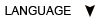
<style>
.page{position:relative;width:100px;height:20px;background:#ffffff}
.page>*{position:absolute;margin:0}
.t1{font:12px "ArialMT";color:#000000}
</style>
<div class="page">
<p class="t1" style="left:5px;top:6px;width:66px;height:9px">LANGUAGE</p>
</div>
